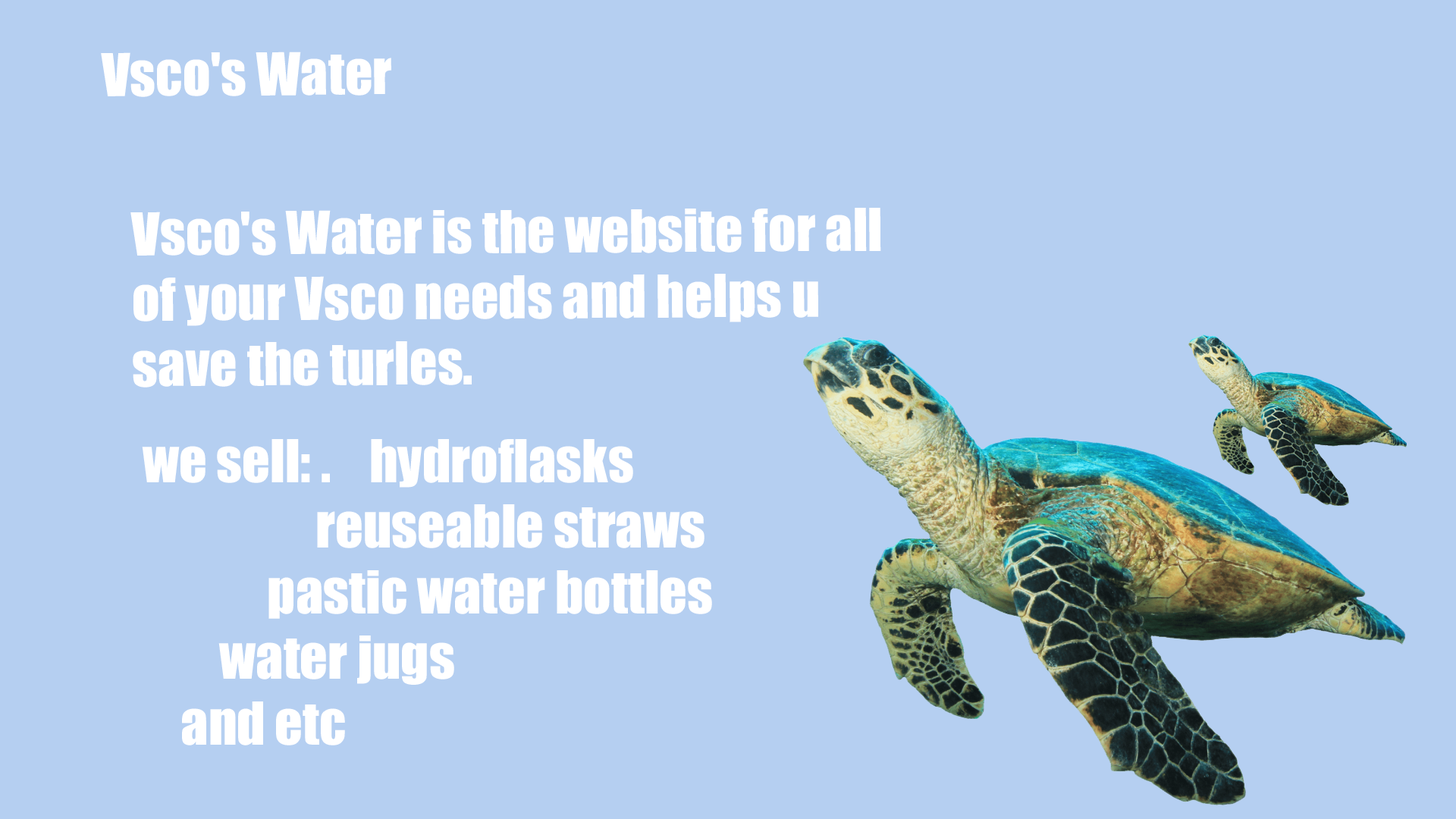
<style>
.page{position:relative;width:1456px;height:819px;background:#b5cff1}
.page>*{position:absolute;margin:0}
.t1{font:54.6px "Impact";color:#ffffff}
</style>
<div class="page">
<p class="t1" style="left:101px;top:52px;width:290px;height:45px">Vsco's Water</p>
<p class="t1" style="left:130px;top:208px;width:751px;height:180px">Vsco's Water is the website for all of your Vsco needs and helps u save the turles.</p>
<p class="t1" style="left:142px;top:439px;width:570px;height:306px">we sell: .    hydroflasks<br>                  reuseable straws<br>             pastic water bottles<br>        water jugs<br>    and etc</p>
</div>
